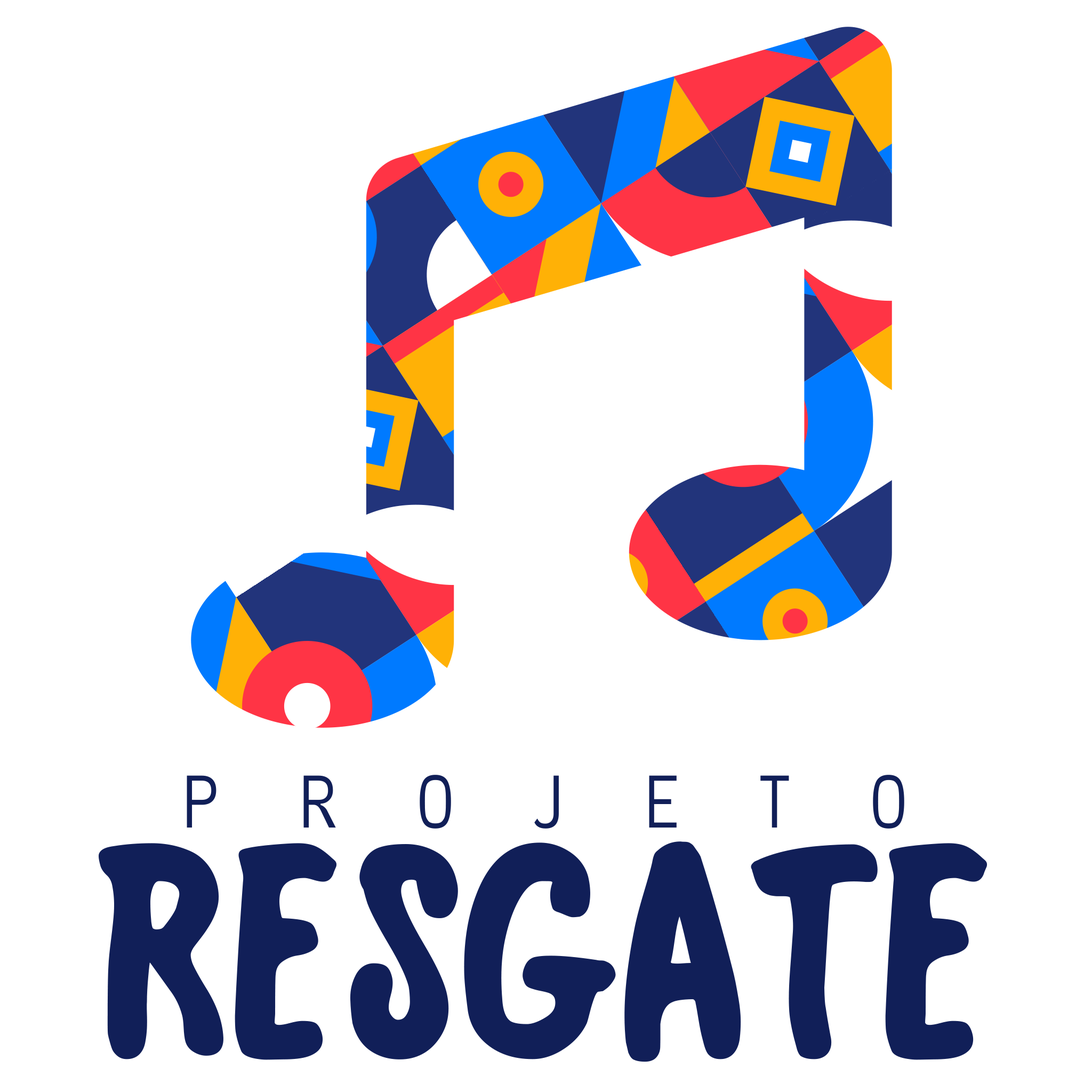
<style>
.page{position:relative;width:1092px;height:1092px;background:#ffffff}
.page>*{position:absolute;margin:0}
.t1{font:72.3px "CACula-Light";letter-spacing:1.1em;color:#111f58}
.t2{font:285.5px "BroadwayCopyistText";color:#111f58;font-weight:bold}
</style>
<div class="page">
<p class="t1" style="left:187px;top:775px;width:717px;height:54px">PROJETO</p>
<p class="t2" style="left:99px;top:841px;width:888px;height:221px">RESGATE</p>
</div>
